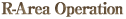
<style>
.page{position:relative;width:126px;height:19px;background:#ffffff}
.page>*{position:absolute;margin:0}
.t1{font:16px "RyuminPro-ExBold";letter-spacing:-0.08em;color:#6a563e;font-weight:bold}
</style>
<div class="page">
<p class="t1" style="left:1px;top:2px;width:123px;height:15px">R-Area Operation</p>
</div>
